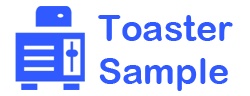
<style>
.page{position:relative;width:250px;height:96px;background:#ffffff}
.page>*{position:absolute;margin:0}
.t1{font:36px "ArialRoundedMTBold";color:#305aff}
</style>
<div class="page">
<p class="t1" style="left:98px;top:15px;width:135px;height:76px">Toaster <br>Sample</p>
</div>
